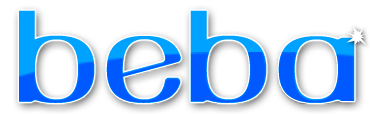
<style>
.page{position:relative;width:370px;height:114px;background:#ffffff}
.page>*{position:absolute;margin:0}
.t1{font:120px "YiggivooUnicode"}
</style>
<div class="page">
<p class="t1" style="left:19px;top:10px;width:336px;height:93px">beba</p>
</div>
